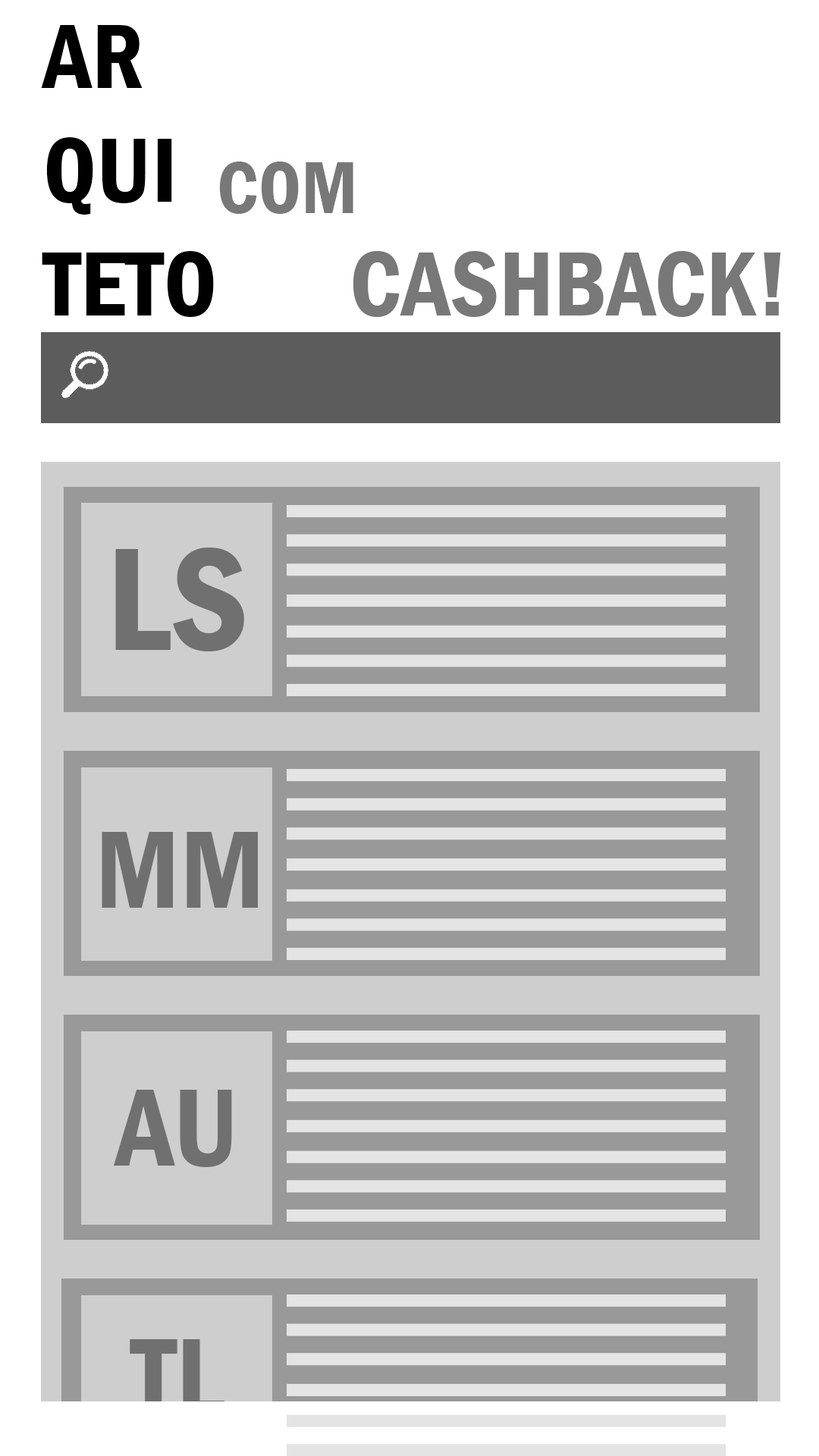
<style>
.page{position:relative;width:819px;height:1456px;background:#ffffff}
.page>*{position:absolute;margin:0}
.t1{font:94.8px "FranklinGothic-DemiCond";color:#000000}
.t2{font:75.8px "FranklinGothic-DemiCond";color:#787878}
.t3{font:94.8px "FranklinGothic-DemiCond";color:#787878}
.t4{font:151.7px "FranklinGothic-DemiCond";color:#707070}
.t5{font:113.7px "FranklinGothic-DemiCond";color:#707070}
</style>
<div class="page">
<p class="t1" style="left:41px;top:25px;width:173px;height:292px">AR<br>QUI<br>TETO</p>
<p class="t2" style="left:219px;top:162px;width:134px;height:52px">COM</p>
<p class="t3" style="left:353px;top:251px;width:428px;height:66px">CASHBACK!</p>
<p class="t4" style="left:115px;top:548px;width:129px;height:103px">LS</p>
<p class="t5" style="left:102px;top:832px;width:156px;height:76px">MM</p>
<p class="t5" style="left:114px;top:1090px;width:118px;height:77px">AU</p>
</div>
